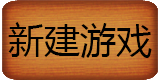
<style>
.page{position:relative;width:160px;height:80px}
.page>*{position:absolute;margin:0}
.t1{font:36px "MicrosoftYaHei";color:#000000}
</style>
<div class="page">
<p class="t1" style="left:8px;top:22px;width:144px;height:36px">新建游戏</p>
</div>
